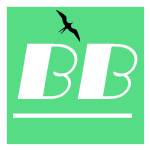
<style>
.page{position:relative;width:150px;height:150px;background:#55dc85}
.page>*{position:absolute;margin:0}
.t1{font:82.9px "Broadway";color:#ffffff;font-style:italic;text-decoration:underline}
</style>
<div class="page">
<p class="t1" style="left:13px;top:43px;width:125px;height:75px">BB</p>
</div>
